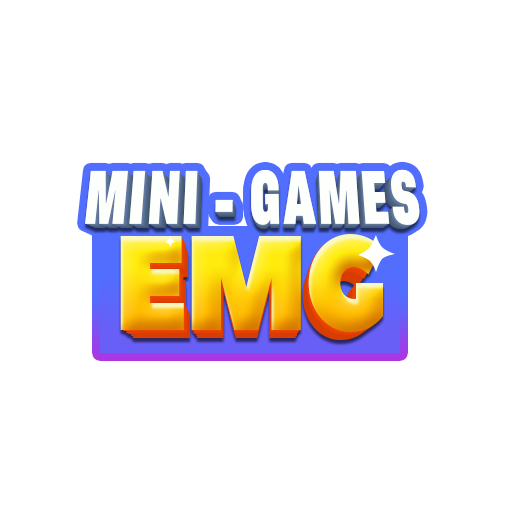
<style>
.page{position:relative;width:512px;height:512px;background:#ffffff}
.page>*{position:absolute;margin:0}
.t1{font:70.4px "AsketCondensed-ExtraBold";letter-spacing:0.025em;color:#fdfffd;scale:0.77 1}
.t2{font:69.7px "AsketCondensed-ExtraBold";letter-spacing:0.025em;color:#fdfffd;scale:0.77 1}
.t3{font:69px "AsketCondensed-ExtraBold";letter-spacing:0.025em;color:#fdfffd;scale:0.77 1}
.t4{font:68.3px "AsketCondensed-ExtraBold";letter-spacing:0.025em;color:#fdfffd;scale:0.77 1}
.t5{font:135px "PeaceSans";letter-spacing:-0.025em;scale:0.83 1}
.t6{font:132.3px "PeaceSans";letter-spacing:-0.025em;scale:0.83 1}
.t7{font:129.7px "PeaceSans";letter-spacing:-0.025em;scale:0.83 1}
.t8{font:127.1px "PeaceSans";letter-spacing:-0.025em;scale:0.83 1}
.t9{font:124.5px "PeaceSans";letter-spacing:-0.025em;scale:0.83 1}
.t10{font:122px "PeaceSans";letter-spacing:-0.025em;scale:0.83 1}
</style>
<div class="page">
<p class="t1" style="left:85px;top:169px;width:335px;height:56px">MINI - GAMES</p>
<p class="t1" style="left:85px;top:169px;width:335px;height:56px">MINI - GAMES</p>
<p class="t2" style="left:87px;top:171px;width:331px;height:55px">MINI - GAMES</p>
<p class="t2" style="left:87px;top:171px;width:331px;height:55px">MINI - GAMES</p>
<p class="t3" style="left:88px;top:172px;width:329px;height:55px">MINI - GAMES</p>
<p class="t3" style="left:88px;top:172px;width:329px;height:55px">MINI - GAMES</p>
<p class="t4" style="left:90px;top:174px;width:326px;height:54px">MINI - GAMES</p>
<p class="t4" style="left:90px;top:174px;width:326px;height:54px">MINI - GAMES</p>
<p class="t5" style="left:120px;top:234px;width:263px;height:98px">EMG</p>
<p class="t5" style="left:120px;top:234px;width:263px;height:98px">EMG</p>
<p class="t6" style="left:123px;top:235px;width:257px;height:99px">EMG</p>
<p class="t6" style="left:123px;top:235px;width:257px;height:99px">EMG</p>
<p class="t7" style="left:126px;top:240px;width:252px;height:95px">EMG</p>
<p class="t7" style="left:126px;top:240px;width:252px;height:95px">EMG</p>
<p class="t8" style="left:128px;top:242px;width:247px;height:95px">EMG</p>
<p class="t8" style="left:128px;top:242px;width:247px;height:95px">EMG</p>
<p class="t9" style="left:131px;top:247px;width:242px;height:91px">EMG</p>
<p class="t9" style="left:131px;top:247px;width:242px;height:91px">EMG</p>
<p class="t10" style="left:133px;top:250px;width:237px;height:91px">EMG</p>
<p class="t10" style="left:133px;top:250px;width:237px;height:91px">EMG</p>
</div>
